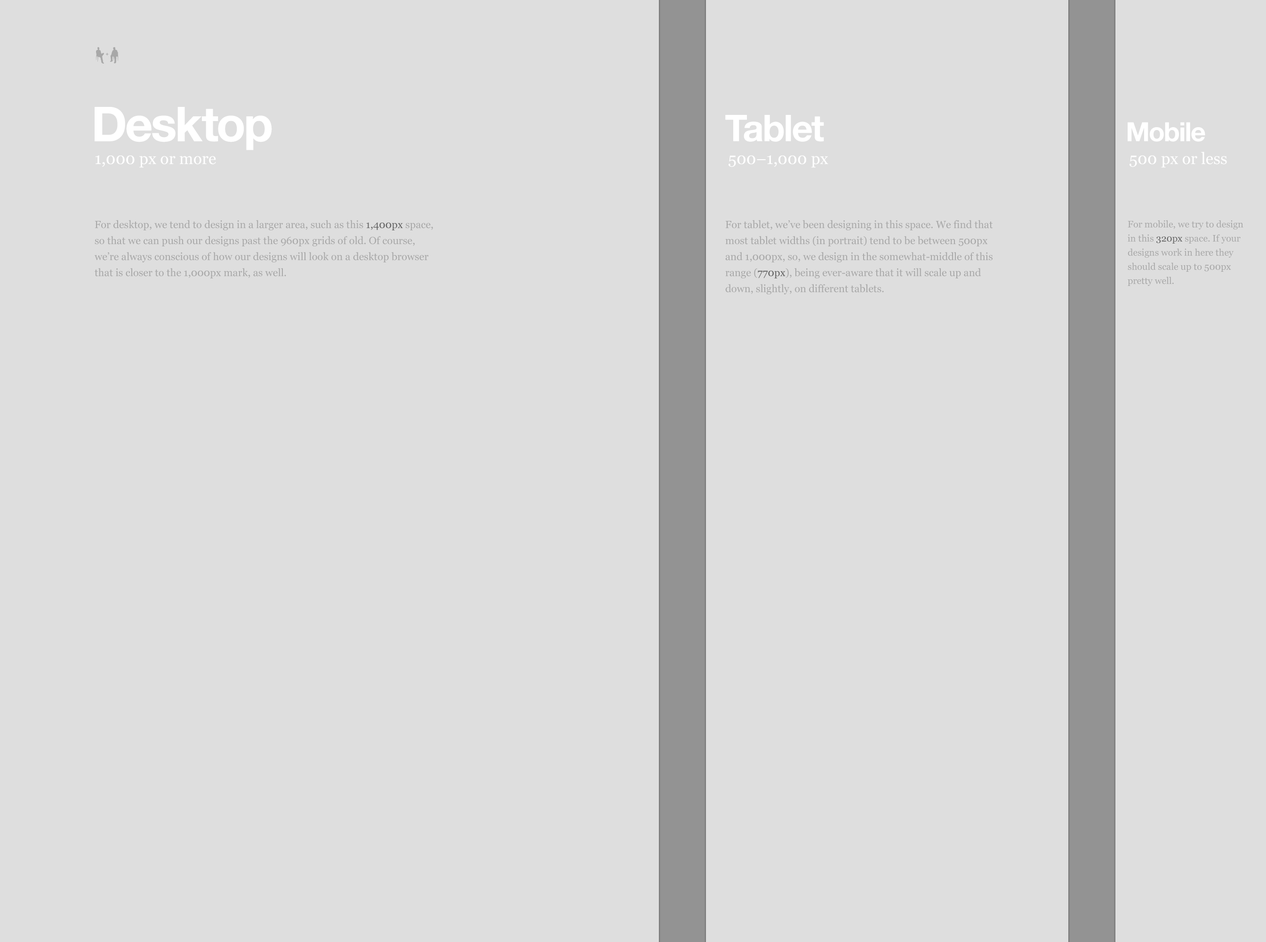
<style>
.page{position:relative;width:1266px;height:942px;background:#dedede}
.page>*{position:absolute;margin:0}
.t1{font:48px "HelveticaNeue-Bold";letter-spacing:-0.025em;color:#ffffff}
.t2{font:36.7px "HelveticaNeue-Bold";letter-spacing:-0.025em;color:#ffffff}
.t3{font:26.4px "HelveticaNeue-Bold";letter-spacing:-0.025em;color:#ffffff}
.t4{font:16px "Georgia";color:#ffffff}
.t5{font:10.4px/16px "Georgia";color:#a8a8a8}
.t6{font:10.4px/16px "Georgia";color:#636363}
.t7{font:9.4px/14.1px "Georgia";color:#a8a8a8}
.t8{font:9.4px/14.1px "Georgia";color:#636363}
</style>
<div class="page">
<p class="t1" style="left:95px;top:107px;width:177px;height:43px">Desktop</p>
<p class="t2" style="left:725px;top:115px;width:99px;height:27px">Tablet</p>
<p class="t3" style="left:1128px;top:122px;width:78px;height:20px">Mobile</p>
<p class="t4" style="left:96px;top:155px;width:120px;height:13px">1,000 px or more</p>
<p class="t4" style="left:729px;top:155px;width:100px;height:13px">500–1,000 px</p>
<p class="t4" style="left:1130px;top:152px;width:97px;height:16px">500 px or less</p>
<p class="t5" style="left:95px;top:220px;width:338px;height:58px">For desktop, we tend to design in a larger area, such as this <span class="t6">1,400px</span> space, so that we can push our designs past the 960px grids of old. Of course, we’re always conscious of how our designs will look on a desktop browser that is closer to the 1,000px mark, as well.</p>
<p class="t5" style="left:725px;top:220px;width:268px;height:74px">For tablet, we’ve been designing in this space. We find that most tablet widths (in portrait) tend to be between 500px and 1,000px, so, we design in the somewhat-middle of this range (<span class="t6">770px</span>), being ever-aware that it will scale up and down, slightly, on different tablets.</p>
<p class="t7" style="left:1128px;top:220px;width:116px;height:66px">For mobile, we try to design in this <span class="t8">320px</span> space. If your designs work in here they should scale up to 500px pretty well.</p>
</div>
